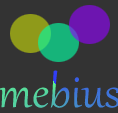
<style>
.page{position:relative;width:118px;height:113px;background:#333333}
.page>*{position:absolute;margin:0}
.t1{font:55px "Gabriola"}
</style>
<div class="page">
<p class="t1" style="left:0px;top:70px;width:120px;height:38px">mebius</p>
</div>
